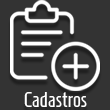
<style>
.page{position:relative;width:110px;height:110px;background:#333333}
.page>*{position:absolute;margin:0}
.t1{font:20.8px "Homenaje-Regular";color:#ffffff}
</style>
<div class="page">
<p class="t1" style="left:24px;top:92px;width:63px;height:15px">Cadastros</p>
</div>
